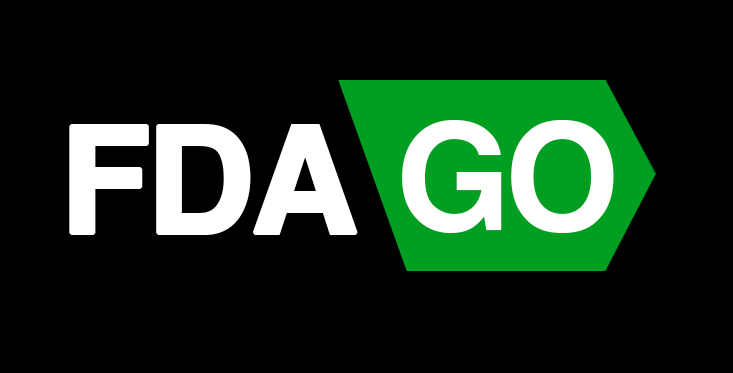
<style>
.page{position:relative;width:733px;height:373px;background:#000000}
.page>*{position:absolute;margin:0}
.t1{font:148px "Helvetica-Bold";letter-spacing:-0.05em;color:#ffffff;font-weight:bold}
.t2{font:148px "Helvetica-Bold";letter-spacing:-0.05em;color:#ffffff;text-transform:uppercase}
</style>
<div class="page">
<p class="t1" style="left:69px;top:124px;width:289px;height:111px">FDA</p>
<p class="t2" style="left:402px;top:120px;width:212px;height:113px">go</p>
</div>
